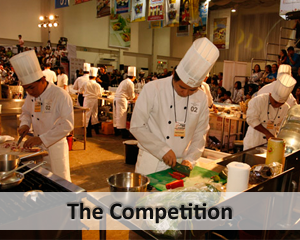
<style>
.page{position:relative;width:300px;height:240px}
.page>*{position:absolute;margin:0}
.t1{font:24px "Calibri-Bold";color:#000000}
</style>
<div class="page">
<p class="t1" style="left:67px;top:202px;width:165px;height:22px">The Competition</p>
</div>
